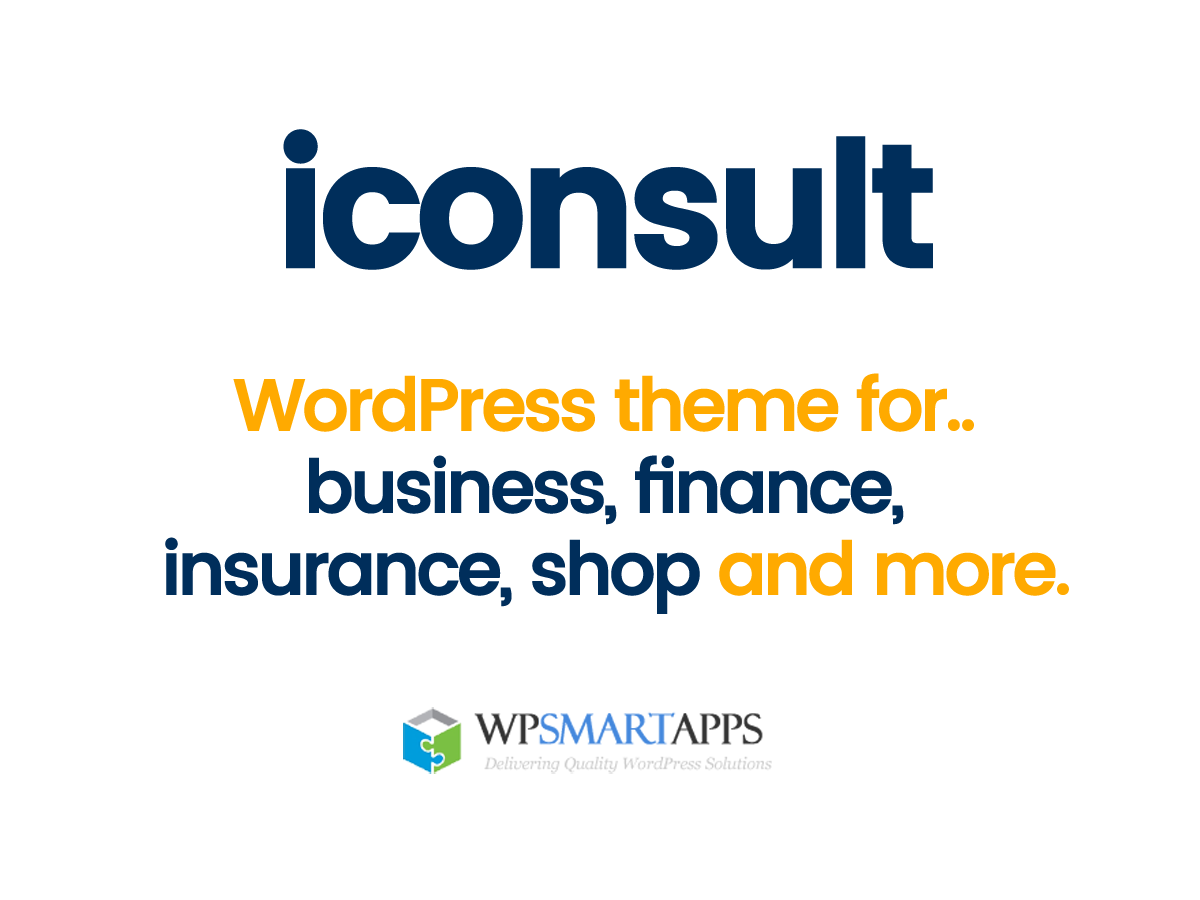
<style>
.page{position:relative;width:1200px;height:900px;background:#ffffff}
.page>*{position:absolute;margin:0}
.t1{font:172px "Poppins-SemiBold";letter-spacing:-0.065em;color:#002e5b;font-weight:bold}
.t2{font:72px/82px "Poppins-Medium";letter-spacing:-0.065em;color:#002e5b;font-weight:bold}
.t3{font:72px/82px "Poppins-Medium";letter-spacing:-0.065em;color:#ffaa00;font-weight:bold}
</style>
<div class="page">
<p class="t1" style="left:283px;top:129px;width:650px;height:141px">iconsult</p>
<p class="t2" style="left:165px;top:373px;width:904px;height:241px;text-align:center"><span class="t3">WordPress theme for.. <br></span>business, finance, <br>insurance, shop <span class="t3">and more.</span></p>
</div>
